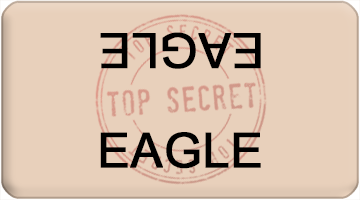
<style>
.page{position:relative;width:360px;height:200px;background:#e8d0bb}
.page>*{position:absolute;margin:0}
.t1{font:48px "ArialMT";color:#000000;font-weight:bold}
</style>
<div class="page">
<p class="t1" style="left:100px;top:32px;width:161px;height:37px;rotate:180deg">EAGLE</p>
<p class="t1" style="left:100px;top:132px;width:161px;height:37px">EAGLE</p>
</div>
